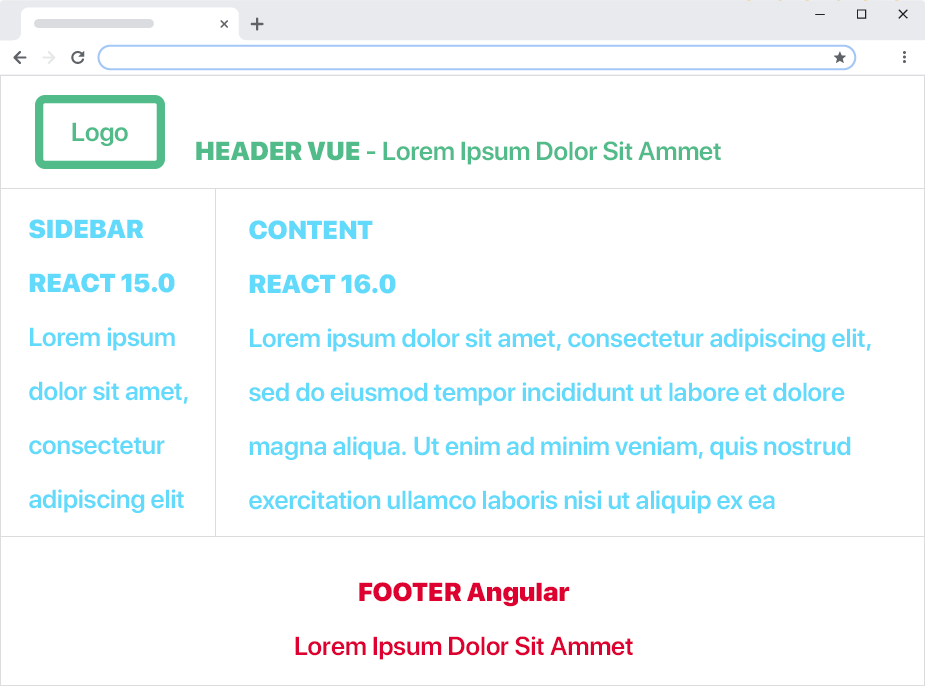
<style>
.page{position:relative;width:925px;height:686px;background:#ffffff}
.page>*{position:absolute;margin:0}
.t1{font:26px "SFProDisplay-Semibold";color:#51bb8a}
.t2{font:26px "SFProDisplay-Black";color:#51bb8a}
.t3{font:26px/54px "SFProDisplay-Semibold";color:#61dafb}
.t4{font:26px/54px "SFProDisplay-Black";color:#61dafb}
.t5{font:26px/54px "SFProDisplay-Semibold";color:#dd0031}
.t6{font:26px/54px "SFProDisplay-Black";color:#dd0031}
</style>
<div class="page">
<p class="t1" style="left:72px;top:122px;width:56px;height:24px">Logo</p>
<p class="t1" style="left:196px;top:141px;width:525px;height:24px"><span class="t2">HEADER VUE</span> - Lorem Ipsum Dolor Sit Ammet</p>
<p class="t3" style="left:29px;top:219px;width:159px;height:294px"><span class="t4">SIDEBAR<br>REACT 15.0<br></span>Lorem ipsum <br>dolor sit amet, <br>consectetur <br>adipiscing elit</p>
<p class="t3" style="left:249px;top:220px;width:622px;height:294px"><span class="t4">CONTENT<br>REACT 16.0<br></span>Lorem ipsum dolor sit amet, consectetur adipiscing elit, <br>sed do eiusmod tempor incididunt ut labore et dolore <br>magna aliqua. Ut enim ad minim veniam, quis nostrud <br>exercitation ullamco laboris nisi ut aliquip ex ea</p>
<p class="t5" style="left:295px;top:582px;width:338px;height:78px;text-align:center"><span class="t6">FOOTER Angular</span><br>Lorem Ipsum Dolor Sit Ammet</p>
</div>
